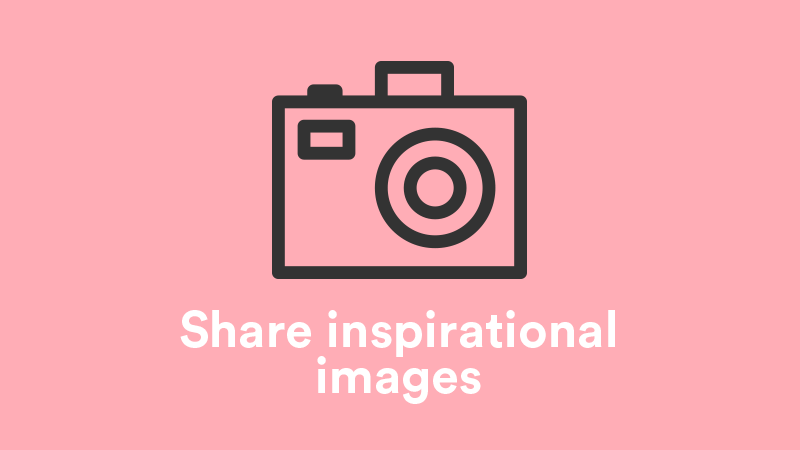
<style>
.page{position:relative;width:800px;height:450px;background:#ffadb6}
.page>*{position:absolute;margin:0}
.t1{font:50.7px/46.7px "CircularStd-Bold";color:#ffffff}
.t2{font:50.7px/46.7px "CircularStd-Bold";color:#ffffff;text-transform:uppercase}
</style>
<div class="page">
<p class="t1" style="left:180px;top:310px;width:435px;height:94px;text-align:center"><span class="t2">S</span>hare inspirational<br>images</p>
</div>
